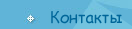
<style>
.page{position:relative;width:132px;height:29px;background:#60b4d8}
.page>*{position:absolute;margin:0}
.t1{font:16px "ComicSansMS";color:#006699}
</style>
<div class="page">
<p class="t1" style="left:51px;top:11px;width:71px;height:13px">Контакты</p>
</div>
